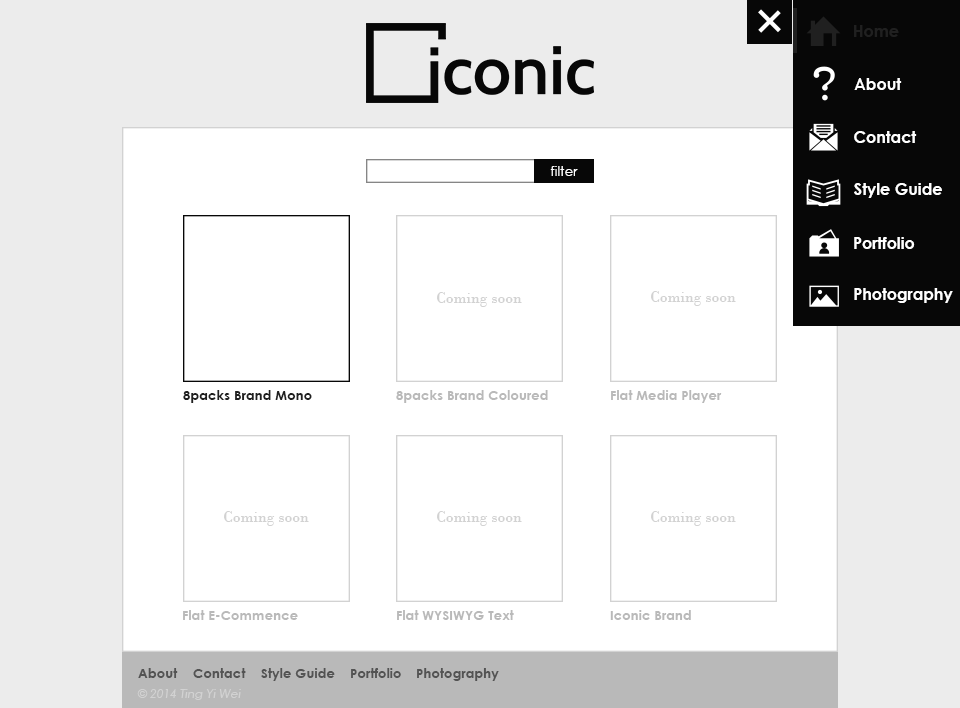
<style>
.page{position:relative;width:960px;height:708px;background:#ffffff}
.page>*{position:absolute;margin:0}
.t1{font:16px "CenturyGothic-Bold";color:#202020}
.t2{font:16px "CenturyGothic-Bold";color:#ffffff}
.t3{font:13.3px "CenturyGothic";color:#ffffff}
.t4{font:16px "BodoniMT";color:#d2d2d2}
.t5{font:12px "CenturyGothic-Bold";color:#ffffff}
.t6{font:13.3px "CenturyGothic-Bold";color:#202020}
.t7{font:13.3px "CenturyGothic-Bold";color:#b9b9b9}
.t8{font:13.3px "CenturyGothic-Bold";color:#535353}
.t9{font:12px "CenturyGothic-Italic";color:#d2d2d2}
</style>
<div class="page">
<p class="t1" style="left:854px;top:25px;width:45px;height:12px">Home</p>
<p class="t2" style="left:854px;top:78px;width:48px;height:12px">About</p>
<p class="t2" style="left:854px;top:131px;width:63px;height:12px">Contact</p>
<p class="t3" style="left:550px;top:166px;width:28px;height:10px">filter</p>
<p class="t2" style="left:854px;top:183px;width:88px;height:15px">Style Guide</p>
<p class="t2" style="left:854px;top:237px;width:61px;height:12px">Portfolio</p>
<p class="t4" style="left:437px;top:292px;width:85px;height:15px">Coming soon</p>
<p class="t4" style="left:651px;top:291px;width:85px;height:15px">Coming soon</p>
<p class="t5" style="left:854px;top:288px;width:99px;height:15px">Photography</p>
<p class="t6" style="left:183px;top:390px;width:129px;height:13px">8packs Brand Mono</p>
<p class="t7" style="left:396px;top:390px;width:152px;height:13px">8packs Brand Coloured</p>
<p class="t7" style="left:611px;top:390px;width:111px;height:13px">Flat Media Player</p>
<p class="t4" style="left:224px;top:511px;width:85px;height:15px">Coming soon</p>
<p class="t4" style="left:437px;top:511px;width:85px;height:15px">Coming soon</p>
<p class="t4" style="left:651px;top:511px;width:85px;height:15px">Coming soon</p>
<p class="t7" style="left:183px;top:610px;width:115px;height:10px">Flat E-Commence</p>
<p class="t7" style="left:397px;top:610px;width:117px;height:10px">Flat WYSIWYG Text</p>
<p class="t7" style="left:610px;top:610px;width:81px;height:10px">Iconic Brand</p>
<p class="t8" style="left:138px;top:668px;width:40px;height:10px">About</p>
<p class="t8" style="left:193px;top:668px;width:53px;height:10px">Contact</p>
<p class="t8" style="left:261px;top:668px;width:74px;height:13px">Style Guide</p>
<p class="t8" style="left:351px;top:668px;width:50px;height:10px">Portfolio</p>
<p class="t8" style="left:417px;top:668px;width:82px;height:13px">Photography</p>
<p class="t9" style="left:137px;top:689px;width:104px;height:11px">© 2014 Ting Yi Wei</p>
</div>
